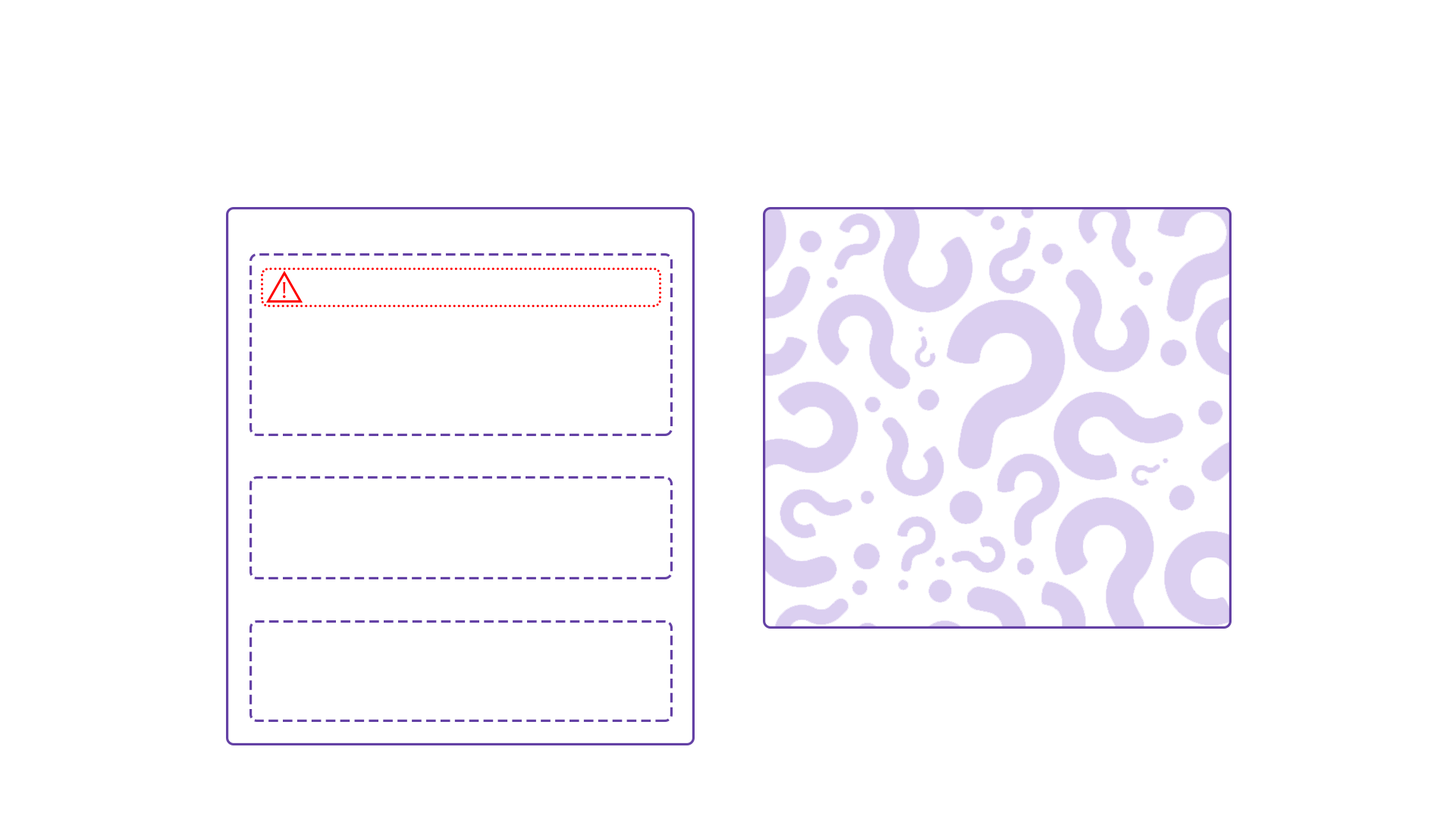
<style>
.page{position:relative;width:1456px;height:819px;background:#ffffff}
.page>*{position:absolute;margin:0}
.t1{font:22.7px "MyriadPro-Regular";color:#ff0000}
</style>
<div class="page">
<p class="t1" style="left:283px;top:282px;width:3px;height:16px">!</p>
</div>
